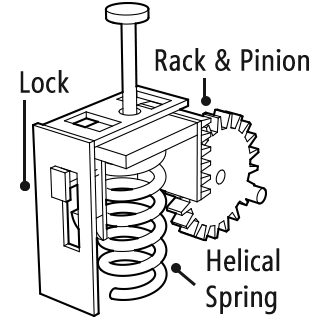
<style>
.page{position:relative;width:320px;height:320px;background:#ffffff}
.page>*{position:absolute;margin:0}
.t1{font:30px "SegoeCondensed";color:#171717;font-weight:bold}
</style>
<div class="page">
<p class="t1" style="left:155px;top:48px;width:154px;height:23px">Rack &amp; Pinion</p>
<p class="t1" style="left:20px;top:70px;width:49px;height:23px">Lock</p>
<p class="t1" style="left:206px;top:248px;width:74px;height:67px">Helical<br>Spring</p>
</div>
